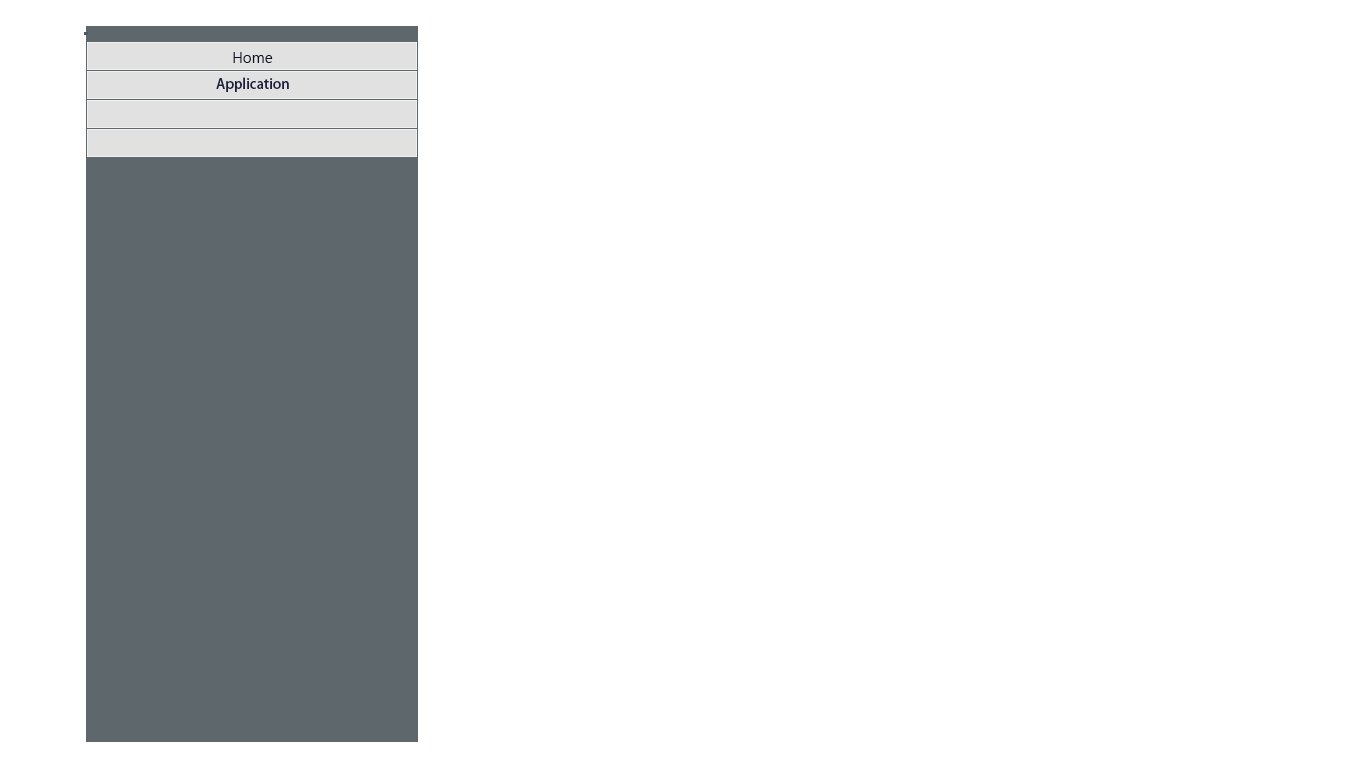
<style>
.page{position:relative;width:1366px;height:768px;background:#ffffff}
.page>*{position:absolute;margin:0}
.t1{font:14px "MicrosoftJhengHeiUIRegular";color:#0d0f25}
.t2{font:14px "AdobeFanHeitiStd-Bold";color:#1c1f3e}
</style>
<div class="page">
<p class="t1" style="left:233px;top:52px;width:40px;height:11px">Home</p>
<p class="t2" style="left:216px;top:77px;width:73px;height:15px">Application</p>
</div>
